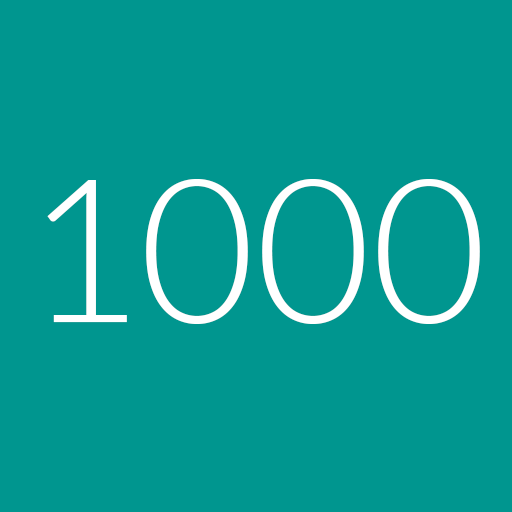
<style>
.page{position:relative;width:512px;height:512px;background:#00968f}
.page>*{position:absolute;margin:0}
.t1{font:200px "Lato-Light";color:#ffffff}
</style>
<div class="page">
<p class="t1" style="left:47px;top:179px;width:433px;height:145px">1000</p>
</div>
